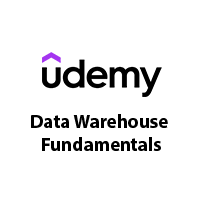
<style>
.page{position:relative;width:200px;height:200px;background:#ffffff}
.page>*{position:absolute;margin:0}
.t1{font:19px "MyriadPro-Bold";color:#000000}
</style>
<div class="page">
<p class="t1" style="left:31px;top:114px;width:137px;height:37px;text-align:center">Data Warehouse <br>Fundamentals</p>
</div>
